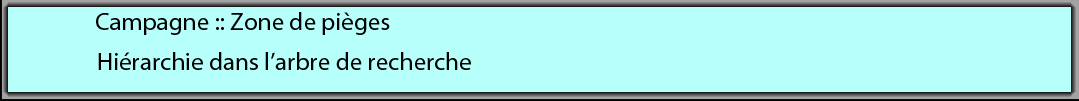
<style>
.page{position:relative;width:1079px;height:101px;background:#b7fffb}
.page>*{position:absolute;margin:0}
.t1{font:25px "MyriadPro-Regular";color:#000000}
</style>
<div class="page">
<p class="t1" style="left:96px;top:12px;width:294px;height:23px">Campagne :: Zone de pièges</p>
<p class="t1" style="left:98px;top:52px;width:373px;height:18px">Hiérarchie dans l’arbre de recherche</p>
</div>
